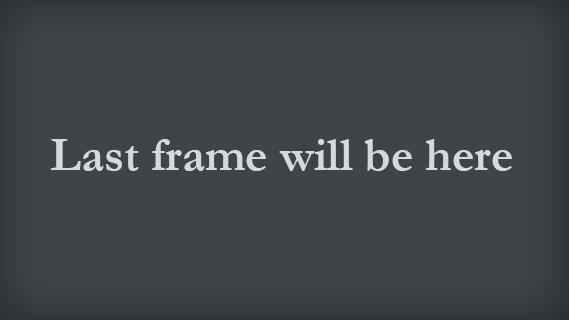
<style>
.page{position:relative;width:569px;height:320px;background:#3f4449}
.page>*{position:absolute;margin:0}
.t1{font:48px "Garamond-Bold";color:#d8d8d8}
</style>
<div class="page">
<p class="t1" style="left:50px;top:139px;width:462px;height:32px">Last frame will be here</p>
</div>
